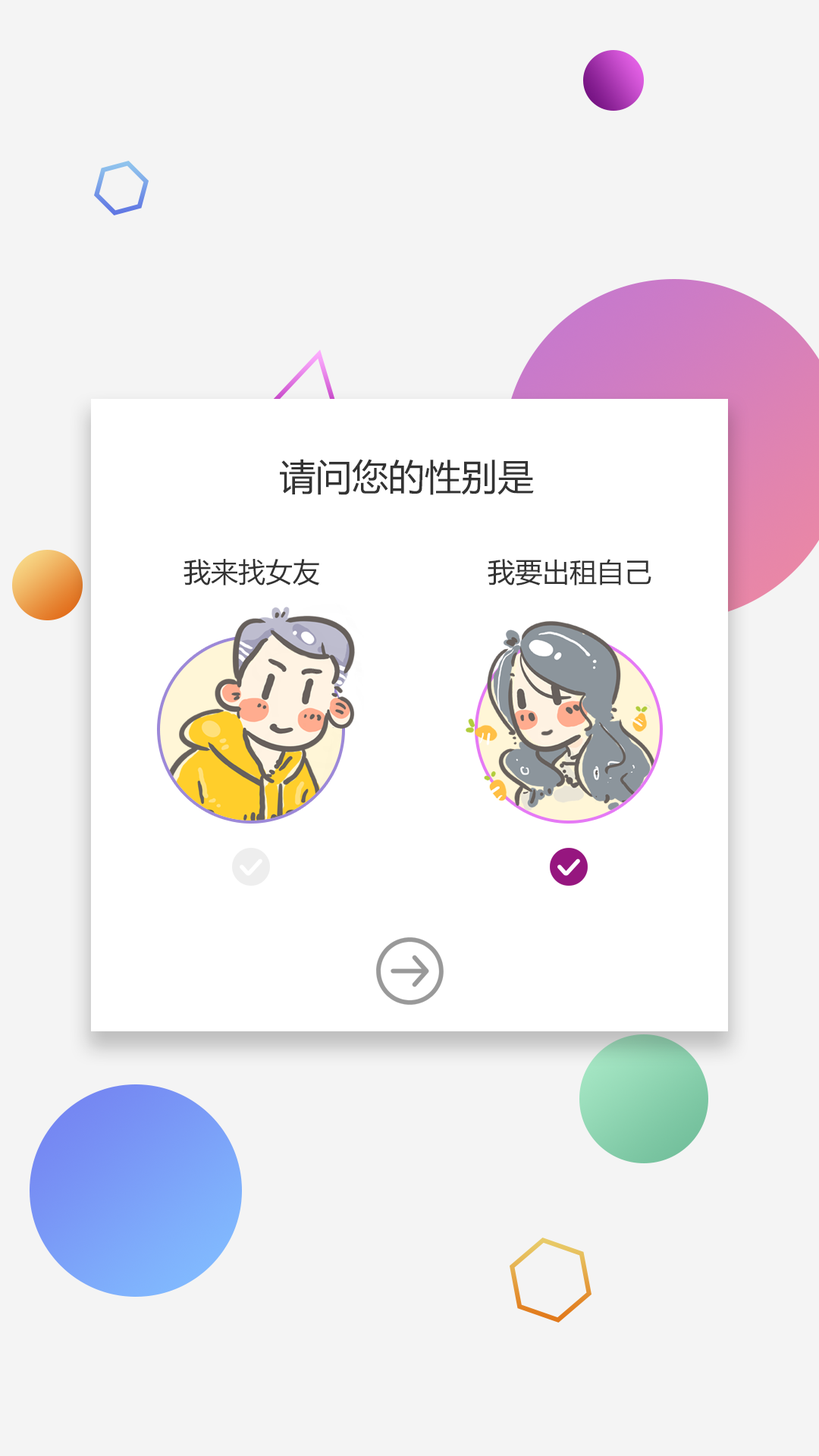
<style>
.page{position:relative;width:819px;height:1456px;background:#f4f4f4}
.page>*{position:absolute;margin:0}
.t1{font:36.4px "MicrosoftYaHei";color:#333333}
.t2{font:27.3px "MicrosoftYaHei";color:#333333}
</style>
<div class="page">
<p class="t1" style="left:280px;top:459px;width:254px;height:36px">请问您的性别是</p>
<p class="t2" style="left:184px;top:559px;width:136px;height:26px">我来找女友</p>
<p class="t2" style="left:488px;top:559px;width:163px;height:26px">我要出租自己</p>
</div>
